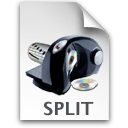
<style>
.page{position:relative;width:128px;height:128px;background:#ffffff}
.page>*{position:absolute;margin:0}
.t1{font:18px "LucidaGrande-Bold";color:#4e4f50}
</style>
<div class="page">
<p class="t1" style="left:44px;top:101px;width:50px;height:15px">SPLIT</p>
</div>
